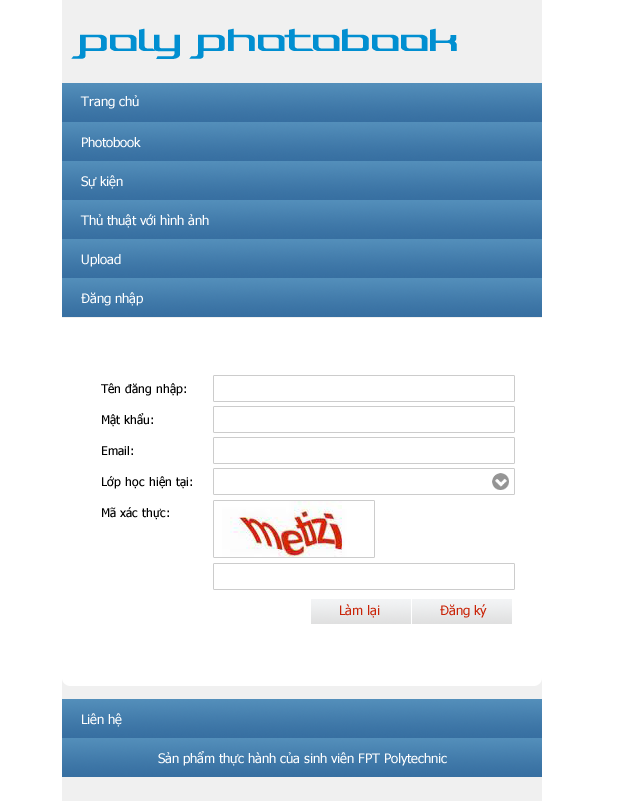
<style>
.page{position:relative;width:625px;height:801px;background:#ffffff}
.page>*{position:absolute;margin:0}
.t1{font:13px "Tahoma";color:#ffffff}
.t2{font:12px "Tahoma";color:#000000}
.t3{font:13px "Tahoma";color:#c92408}
</style>
<div class="page">
<p class="t1" style="left:80px;top:95px;width:59px;height:14px">Trang chủ</p>
<p class="t1" style="left:82px;top:137px;width:59px;height:11px">Photobook</p>
<p class="t1" style="left:81px;top:175px;width:42px;height:14px">Sự kiện</p>
<p class="t1" style="left:80px;top:214px;width:129px;height:14px">Thủ thuật với hình ảnh</p>
<p class="t1" style="left:81px;top:254px;width:40px;height:13px">Upload</p>
<p class="t1" style="left:81px;top:292px;width:62px;height:14px">Đăng nhập</p>
<p class="t2" style="left:101px;top:383px;width:85px;height:13px">Tên đăng nhập:</p>
<p class="t2" style="left:102px;top:413px;width:51px;height:14px">Mật khẩu:</p>
<p class="t2" style="left:102px;top:446px;width:31px;height:10px">Email:</p>
<p class="t2" style="left:102px;top:476px;width:90px;height:13px">Lớp học hiện tại:</p>
<p class="t2" style="left:102px;top:507px;width:67px;height:13px">Mã xác thực:</p>
<p class="t3" style="left:340px;top:604px;width:40px;height:14px">Làm lại</p>
<p class="t3" style="left:440px;top:604px;width:47px;height:14px">Đăng ký</p>
<p class="t1" style="left:82px;top:713px;width:40px;height:14px">Liên hệ</p>
<p class="t1" style="left:158px;top:751px;width:289px;height:15px">Sản phẩm thực hành của sinh viên FPT Polytechnic</p>
</div>
